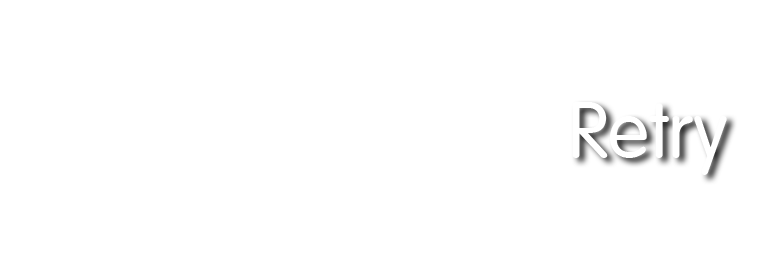
<style>
.page{position:relative;width:768px;height:256px;background:#ffffff}
.page>*{position:absolute;margin:0}
.t1{font:78.5px "Arial-Rounded";color:#ffffff}
</style>
<div class="page">
<p class="t1" style="left:572px;top:102px;width:155px;height:73px">Retry</p>
</div>
